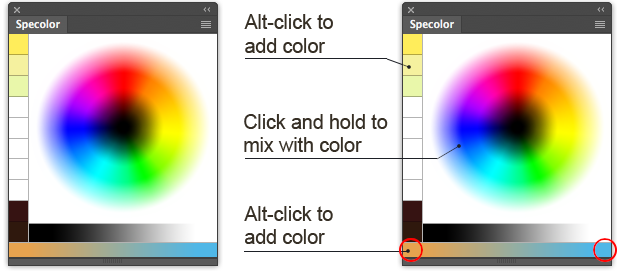
<style>
.page{position:relative;width:617px;height:273px;background:#ffffff}
.page>*{position:absolute;margin:0}
.t1{font:19.5px "ArialMT";color:#362f25}
</style>
<div class="page">
<p class="t1" style="left:244px;top:14px;width:89px;height:39px">Alt-click to<br>add color</p>
<p class="t1" style="left:244px;top:114px;width:144px;height:38px">Click and hold to<br>mix with color</p>
<p class="t1" style="left:244px;top:206px;width:89px;height:38px">Alt-click to<br>add color</p>
</div>
